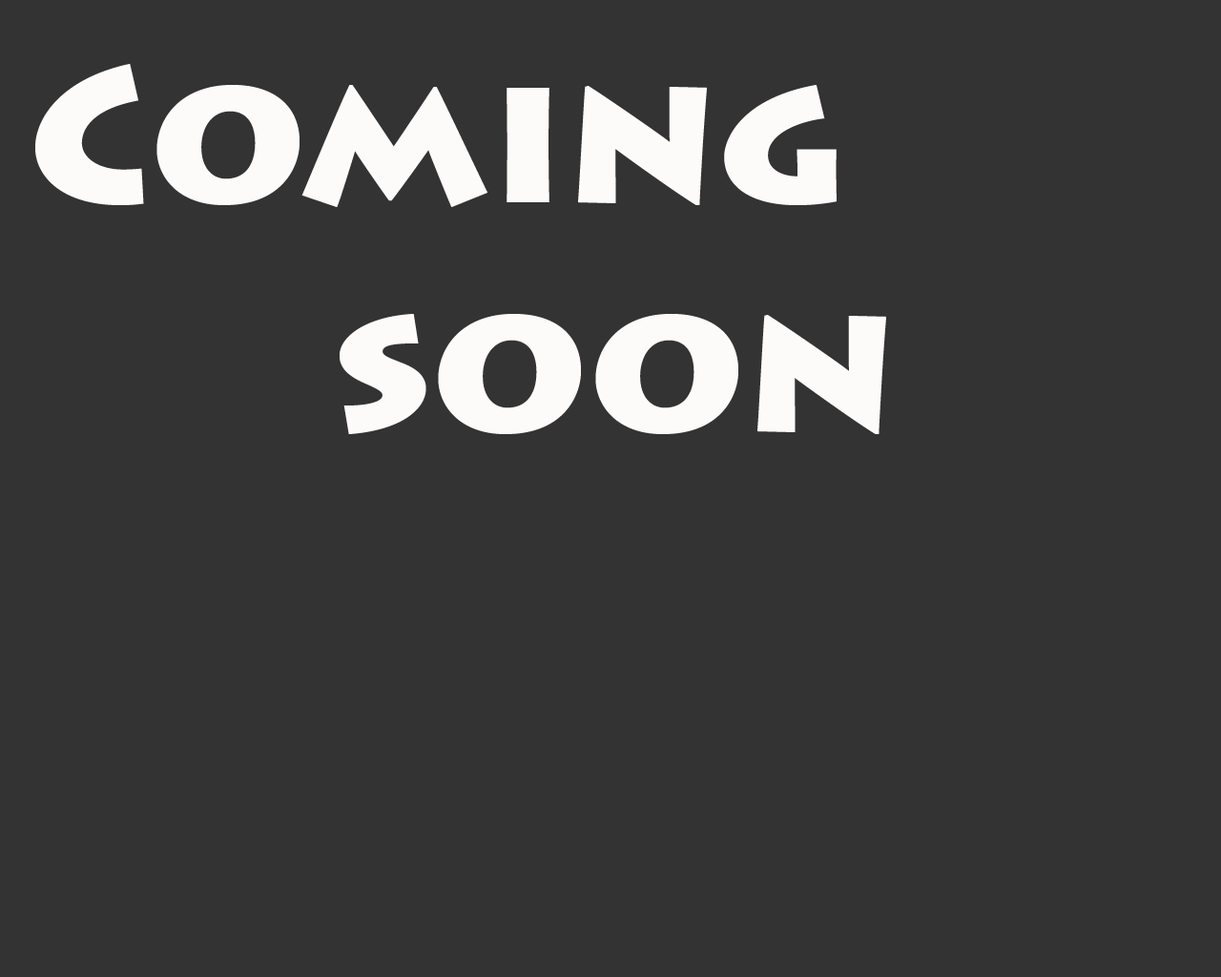
<style>
.page{position:relative;width:1221px;height:977px;background:#333333}
.page>*{position:absolute;margin:0}
.t1{font:190.8px "LithosPro-Black";color:#fdfafa}
</style>
<div class="page">
<p class="t1" style="left:35px;top:64px;width:851px;height:370px">Coming<br>soon</p>
</div>
